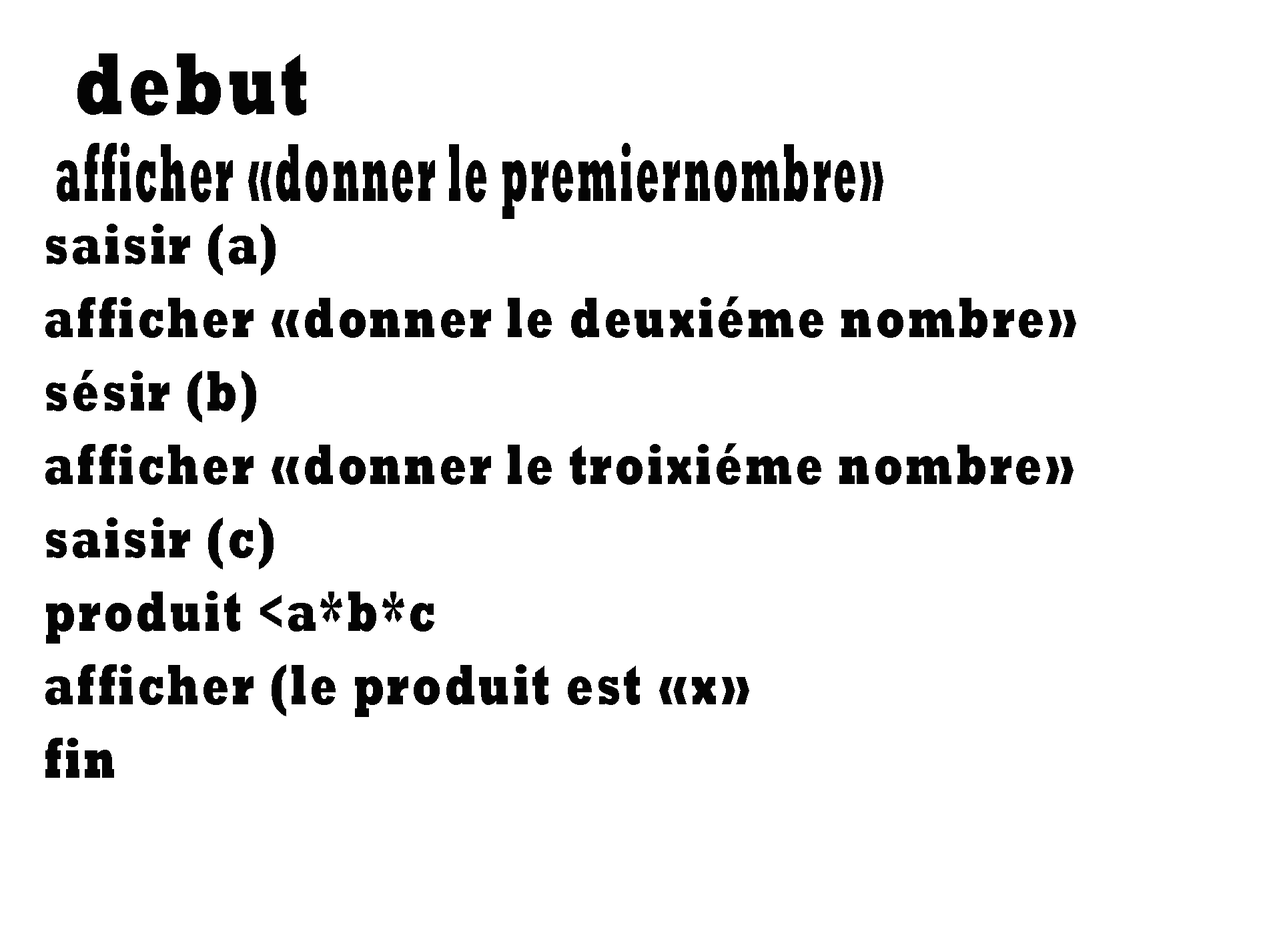
<style>
.page{position:relative;width:1261px;height:946px;background:#ffffff}
.page>*{position:absolute;margin:0}
.t1{font:89.8px "Rockwell-ExtraBold";letter-spacing:0.075em;color:#040404;scale:0.68 1}
.t2{font:83.8px "Rockwell-ExtraBold";letter-spacing:0.075em;color:#040404;scale:0.4 1}
.t3{font:58.1px "Rockwell-ExtraBold";letter-spacing:0.075em;color:#040404;scale:0.68 1}
</style>
<div class="page">
<p class="t1" style="left:77px;top:53px;width:229px;height:62px">debut</p>
<p class="t2" style="left:57px;top:143px;width:826px;height:76px">afficher «donner le premiernombre»</p>
<p class="t3" style="left:45px;top:224px;width:1031px;height:553px">saisir (a)<br><br>afficher «donner le deuxiéme nombre»<br><br>sésir (b)<br><br>afficher «donner le troixiéme nombre»<br><br>saisir (c)<br><br>produit &lt;a*b*c<br><br>afficher (le produit est «x»<br><br>fin</p>
</div>
